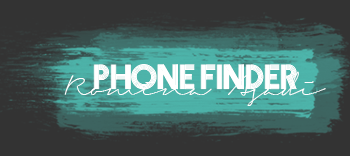
<style>
.page{position:relative;width:350px;height:156px;background:#333333}
.page>*{position:absolute;margin:0}
.t1{font:31.2px "Prisma";color:#ffffff}
</style>
<div class="page">
<p class="t1" style="left:93px;top:64px;width:204px;height:26px">Phone Finder</p>
</div>
